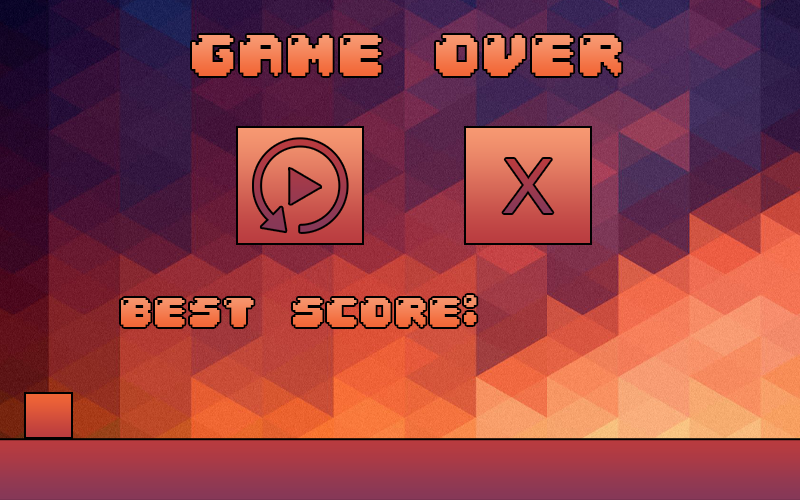
<style>
.page{position:relative;width:800px;height:500px}
.page>*{position:absolute;margin:0}
.t1{font:58.3px "04b30"}
.t2{font:41.7px "04b30"}
</style>
<div class="page">
<p class="t1" style="left:192px;top:35px;width:430px;height:41px">game over</p>
<p class="t2" style="left:121px;top:295px;width:356px;height:32px">best score:</p>
</div>
